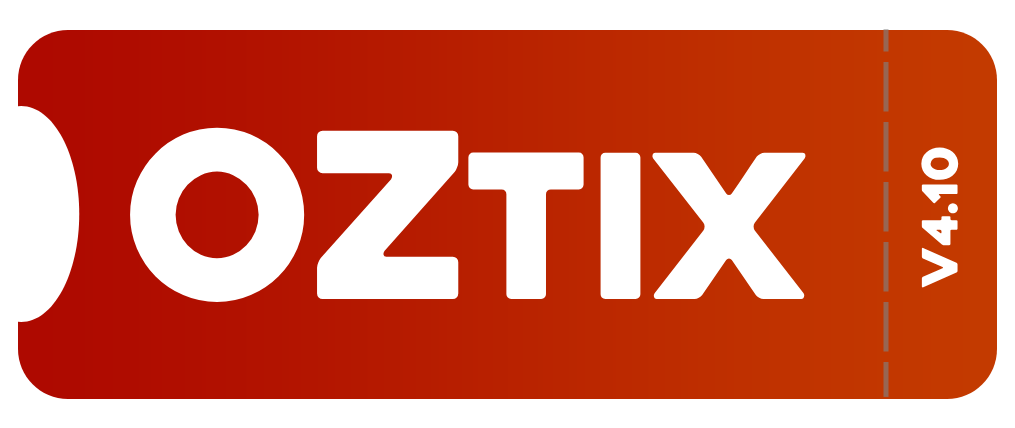
<style>
.page{position:relative;width:1015px;height:428px;background:#ffffff}
.page>*{position:absolute;margin:0}
.t1{font:200px "Heavitas";color:#ffffff}
.t2{font:230px "Heavitas";color:#ffffff}
.t3{font:48.7px "Heavitas";color:#ffffff}
</style>
<div class="page">
<p class="t1" style="left:130px;top:127px;width:676px;height:175px"><span class="t2">OZ</span>tix</p>
<p class="t3" style="left:921px;top:147px;width:38px;height:141px;rotate:-90deg">v4.10</p>
</div>
